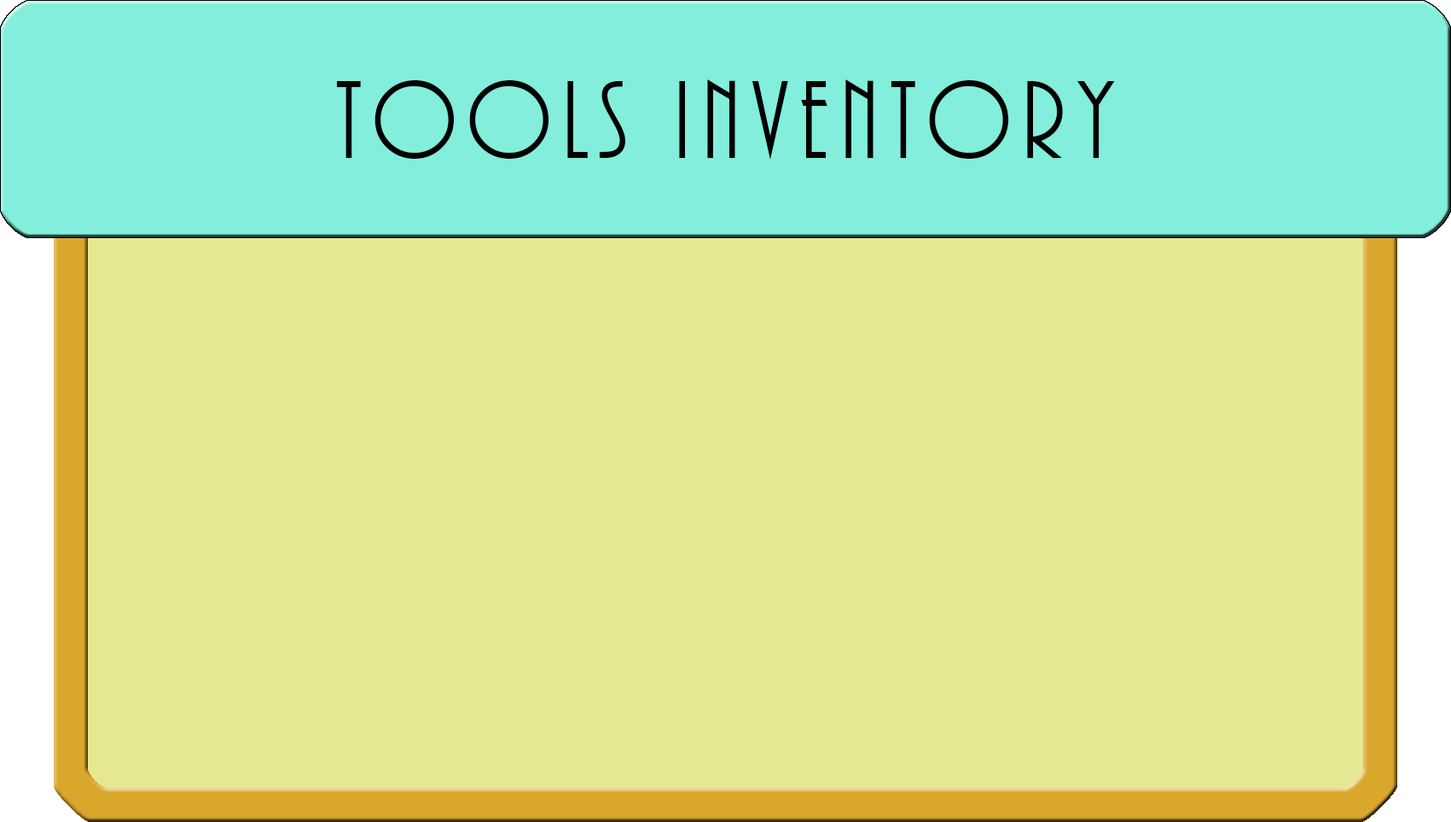
<style>
.page{position:relative;width:1451px;height:822px;background:#e5e893}
.page>*{position:absolute;margin:0}
.t1{font:115px "ARBONNIE";letter-spacing:0.1em;color:#000000}
</style>
<div class="page">
<p class="t1" style="left:336px;top:79px;width:779px;height:81px">tools inventory</p>
</div>
